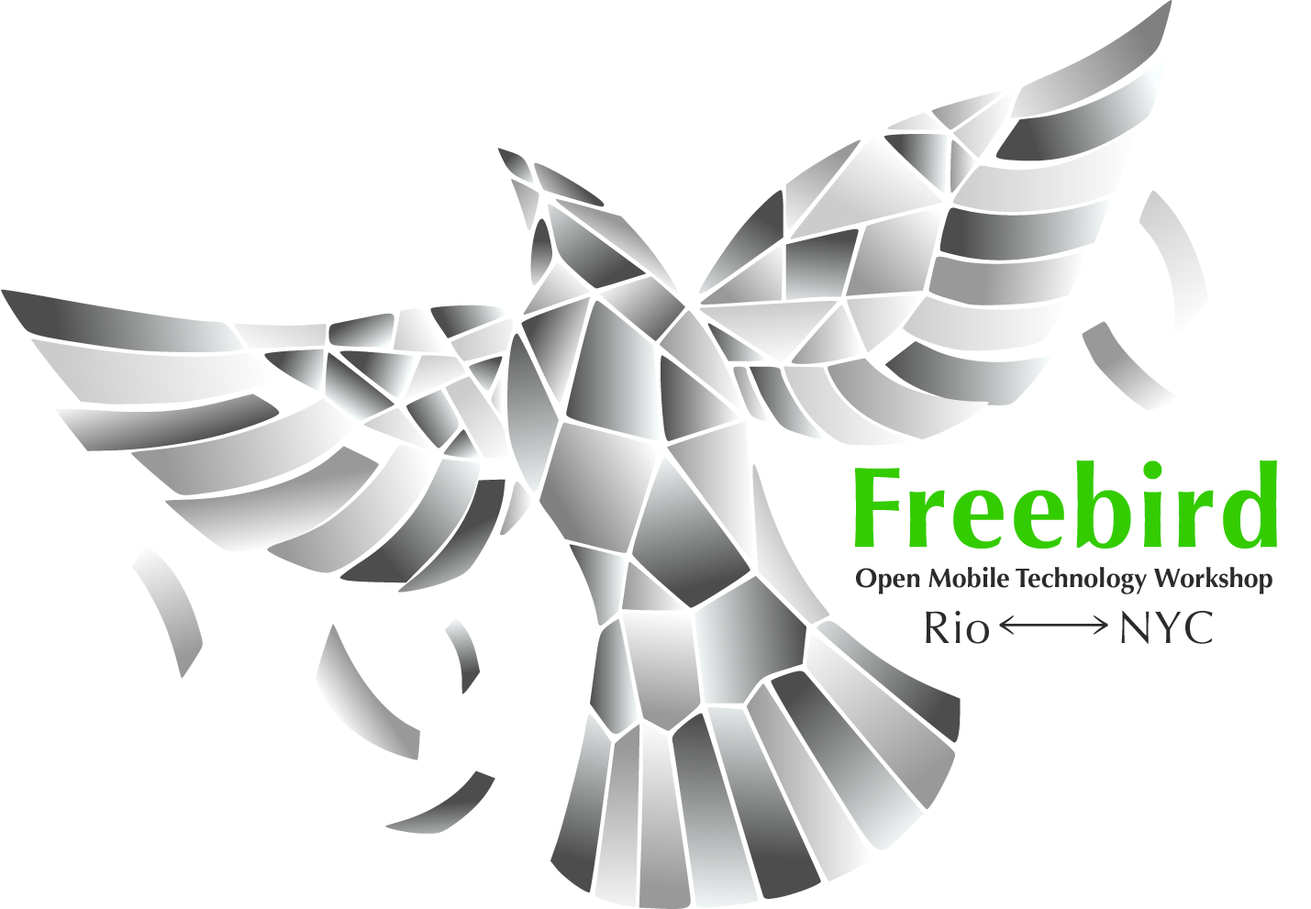
<style>
.page{position:relative;width:1311px;height:909px;background:#ffffff}
.page>*{position:absolute;margin:0}
.t1{font:114.7px "Optima-Bold";letter-spacing:0.025em;color:#33cc00}
.t2{font:26.8px "Optima-Bold";color:#2d2a2a}
.t3{font:45.9px "Optima-Regular";letter-spacing:0.025em;color:#2d2a2a}
</style>
<div class="page">
<p class="t1" style="left:854px;top:461px;width:423px;height:88px">Freebird</p>
<p class="t2" style="left:856px;top:567px;width:417px;height:28px">Open Mobile Technology Workshop</p>
<p class="t3" style="left:926px;top:611px;width:287px;height:33px">Rio         NYC</p>
</div>
